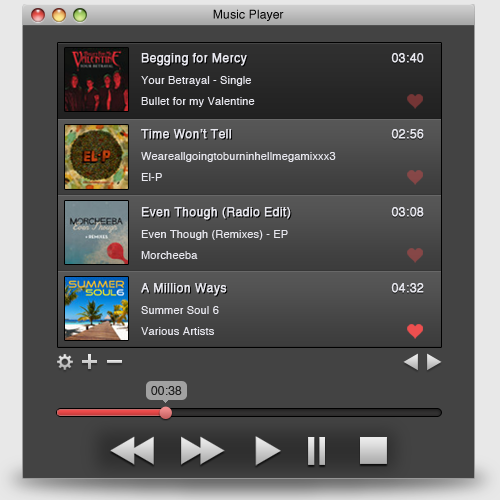
<style>
.page{position:relative;width:500px;height:500px;background:#434343}
.page>*{position:absolute;margin:0}
.t1{font:12px "Helvetica";letter-spacing:0.015em;color:#000000}
.t2{font:12px "Helvetica";letter-spacing:0.015em;color:#e7e7ee;font-weight:bold}
.t3{font:11px "Helvetica";letter-spacing:0.015em;color:#e7e7ee}
.t4{font:12px "Helvetica";letter-spacing:0.015em;color:#1f1f1f}
</style>
<div class="page">
<p class="t1" style="left:213px;top:9px;width:71px;height:12px">Music Player</p>
<p class="t2" style="left:141px;top:53px;width:106px;height:13px">Begging for Mercy</p>
<p class="t2" style="left:391px;top:53px;width:33px;height:10px">03:40</p>
<p class="t3" style="left:141px;top:76px;width:110px;height:10px">Your Betrayal - Single</p>
<p class="t3" style="left:141px;top:97px;width:114px;height:10px">Bullet for my Valentine</p>
<p class="t2" style="left:141px;top:129px;width:91px;height:10px">Time Won’t Tell</p>
<p class="t2" style="left:391px;top:129px;width:33px;height:10px">02:56</p>
<p class="t3" style="left:141px;top:152px;width:195px;height:10px">Weareallgoingtoburninhellmegamixxx3</p>
<p class="t3" style="left:141px;top:173px;width:21px;height:8px">El-P</p>
<p class="t2" style="left:141px;top:207px;width:150px;height:13px">Even Though (Radio Edit)</p>
<p class="t2" style="left:391px;top:207px;width:33px;height:10px">03:08</p>
<p class="t3" style="left:141px;top:230px;width:147px;height:10px">Even Though (Remixes) - EP</p>
<p class="t3" style="left:141px;top:251px;width:57px;height:8px">Morcheeba</p>
<p class="t2" style="left:141px;top:283px;width:86px;height:13px">A Million Ways</p>
<p class="t2" style="left:391px;top:283px;width:33px;height:10px">04:32</p>
<p class="t3" style="left:141px;top:306px;width:78px;height:8px">Summer Soul 6</p>
<p class="t3" style="left:141px;top:327px;width:73px;height:8px">Various Artists</p>
<p class="t4" style="left:151px;top:386px;width:31px;height:9px">00:38</p>
</div>
